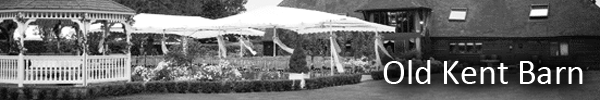
<style>
.page{position:relative;width:600px;height:100px}
.page>*{position:absolute;margin:0}
.t1{font:36px "Calibri";color:#ffffff}
</style>
<div class="page">
<p class="t1" style="left:383px;top:60px;width:200px;height:24px">Old Kent Barn</p>
</div>
